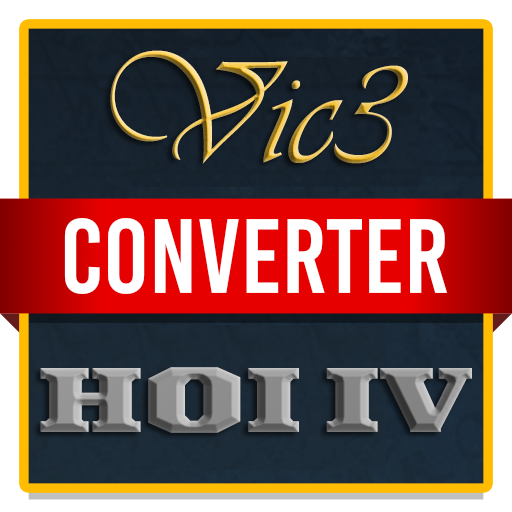
<style>
.page{position:relative;width:512px;height:512px}
.page>*{position:absolute;margin:0}
.t1{font:100px "IronmongerBlack"}
.t2{font:150px "Vivaldii"}
</style>
<div class="page">
<p class="t1" style="left:40px;top:50px;width:432px;height:383px;text-align:center"><span class="t2">Vic3<br><br></span> HOI IV</p>
</div>
